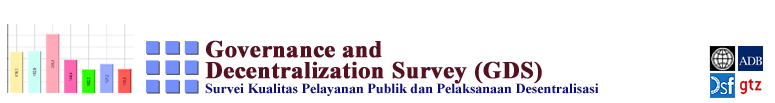
<style>
.page{position:relative;width:775px;height:103px;background:#ffffff}
.page>*{position:absolute;margin:0}
.t1{font:24px/21px "TimesNewRomanPS-BoldMT";color:#561121;font-weight:bold}
.t2{font:14px "TimesNewRomanPS-BoldMT";color:#101074}
</style>
<div class="page">
<p class="t1" style="left:205px;top:40px;width:337px;height:44px">Governance and<br>Decentralization Survey (GDS)</p>
<p class="t2" style="left:205px;top:83px;width:394px;height:13px">Survei Kualitas Pelayanan Publik dan Pelaksanaan Desentralisasi</p>
</div>
